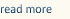
<style>
.page{position:relative;width:70px;height:19px;background:#fdfaf2}
.page>*{position:absolute;margin:0}
.t1{font:13px "Calibri";scale:0.94 1}
</style>
<div class="page">
<p class="t1" style="left:1px;top:4px;width:51px;height:9px">read more</p>
</div>
